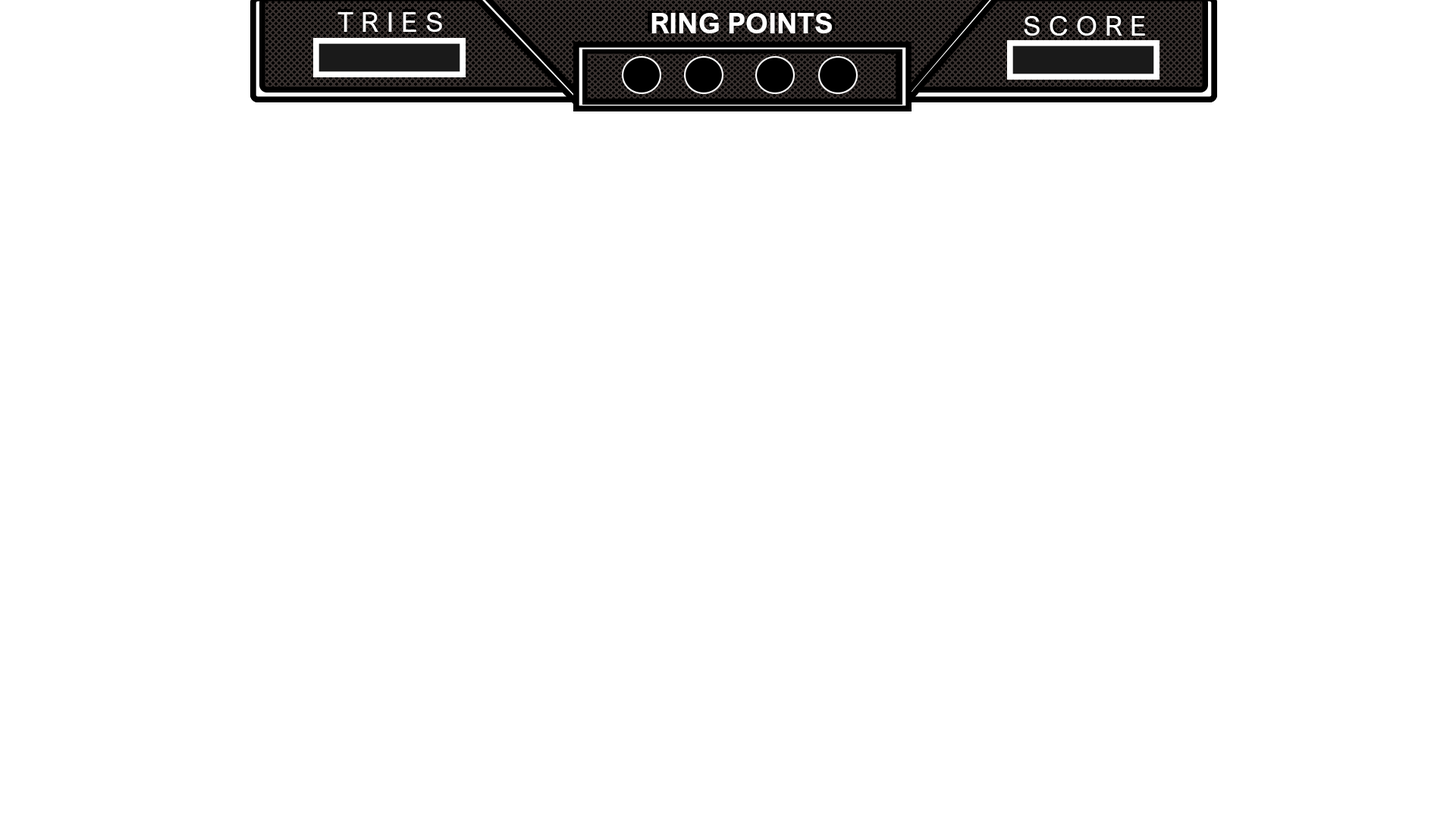
<style>
.page{position:relative;width:1456px;height:819px;background:#ffffff}
.page>*{position:absolute;margin:0}
.t1{font:27.7px "ArialNova";color:#ffffff}
.t2{font:28.9px "ArialNova-Bold";color:#ffffff}
.t3{font:27.5px "ArialNova";color:#ffffff}
</style>
<div class="page">
<p class="t1" style="left:337px;top:12px;width:105px;height:20px">T R I E S</p>
<p class="t2" style="left:651px;top:13px;width:181px;height:20px">RING POINTS</p>
<p class="t3" style="left:1024px;top:16px;width:121px;height:20px">S C O R E</p>
</div>
